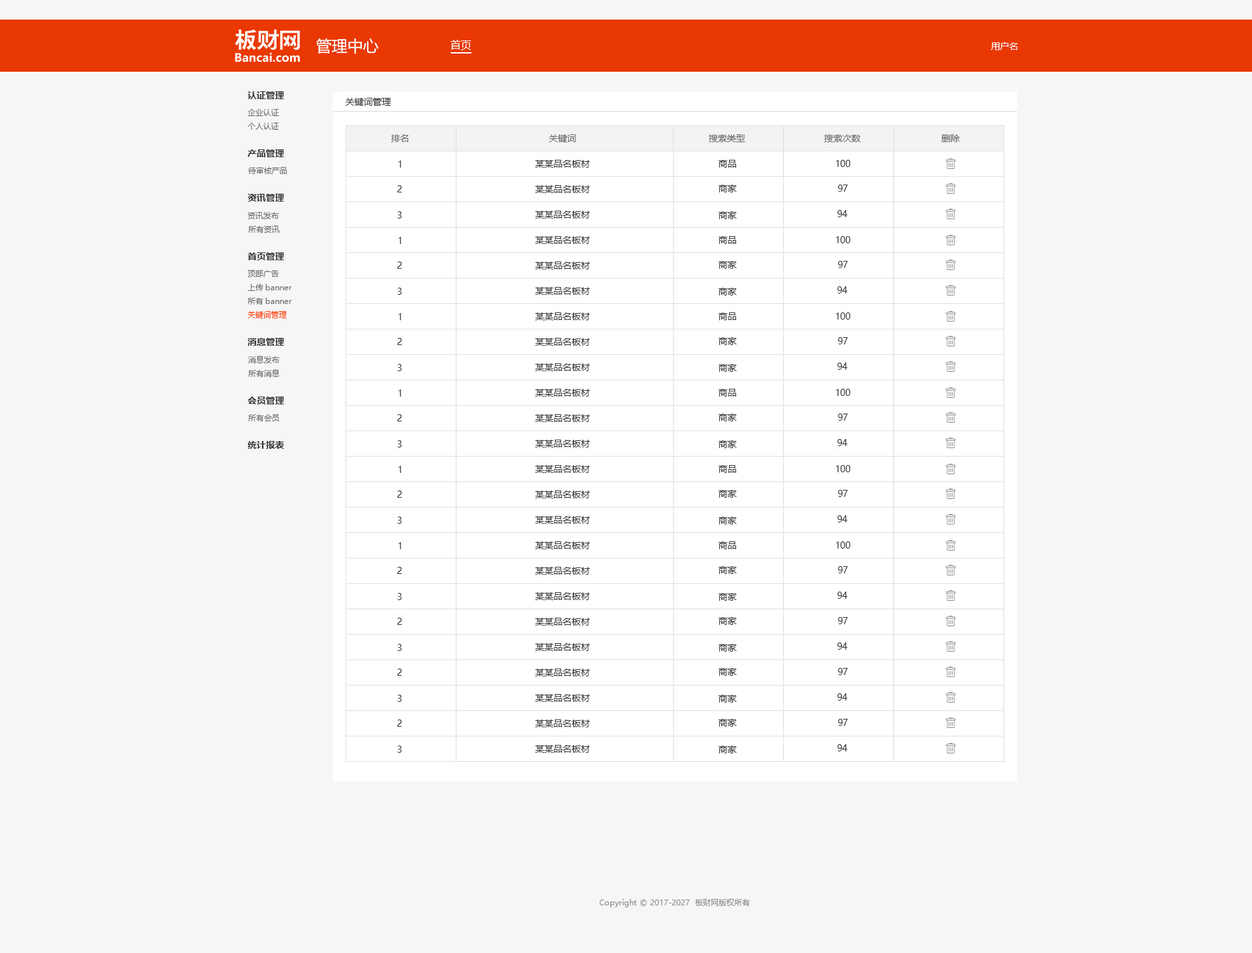
<style>
.page{position:relative;width:1252px;height:953px;background:#f6f6f6}
.page>*{position:absolute;margin:0}
.t1{font:15.6px "MicrosoftYaHei";color:#ffffff}
.t2{font:10.4px "MicrosoftYaHei";color:#ffffff}
.t3{font:9.1px "MicrosoftYaHei";color:#ffffff}
.t4{font:9.1px "MicrosoftYaHei-Bold";color:#333333}
.t5{font:9.1px "MicrosoftYaHei";color:#333333}
.t6{font:7.8px "MicrosoftYaHei";color:#666666}
.t7{font:9.1px "MicrosoftYaHei";color:#666666}
.t8{font:7.8px "MicrosoftYaHei";color:#ff3c00}
.t9{font:7.8px "MicrosoftYaHei";color:#888888}
</style>
<div class="page">
<p class="t1" style="left:316px;top:38px;width:63px;height:16px">管理中心</p>
<p class="t2" style="left:451px;top:40px;width:20px;height:10px">首页</p>
<p class="t3" style="left:991px;top:42px;width:27px;height:8px">用户名</p>
<p class="t4" style="left:248px;top:91px;width:36px;height:8px">认证管理</p>
<p class="t5" style="left:346px;top:98px;width:45px;height:8px">关键词管理</p>
<p class="t6" style="left:248px;top:109px;width:31px;height:7px">企业认证</p>
<p class="t6" style="left:248px;top:123px;width:31px;height:7px">个人认证</p>
<p class="t7" style="left:391px;top:134px;width:18px;height:8px">排名</p>
<p class="t7" style="left:549px;top:134px;width:27px;height:8px">关键词</p>
<p class="t7" style="left:709px;top:134px;width:36px;height:8px">搜索类型</p>
<p class="t7" style="left:824px;top:134px;width:37px;height:8px">搜索次数</p>
<p class="t7" style="left:941px;top:134px;width:19px;height:8px">删除</p>
<p class="t4" style="left:247px;top:149px;width:37px;height:8px">产品管理</p>
<p class="t5" style="left:398px;top:160px;width:3px;height:8px">1</p>
<p class="t5" style="left:535px;top:160px;width:55px;height:8px">某某品名板材</p>
<p class="t5" style="left:718px;top:160px;width:18px;height:8px">商品</p>
<p class="t5" style="left:836px;top:160px;width:14px;height:7px">100</p>
<p class="t6" style="left:248px;top:167px;width:39px;height:7px">待审核产品</p>
<p class="t5" style="left:397px;top:185px;width:5px;height:7px">2</p>
<p class="t5" style="left:535px;top:185px;width:55px;height:8px">某某品名板材</p>
<p class="t5" style="left:718px;top:185px;width:19px;height:7px">商家</p>
<p class="t5" style="left:838px;top:185px;width:10px;height:7px">97</p>
<p class="t4" style="left:248px;top:194px;width:36px;height:7px">资讯管理</p>
<p class="t5" style="left:837px;top:210px;width:11px;height:7px">94</p>
<p class="t6" style="left:248px;top:212px;width:31px;height:7px">资讯发布</p>
<p class="t5" style="left:397px;top:211px;width:5px;height:7px">3</p>
<p class="t5" style="left:535px;top:211px;width:55px;height:7px">某某品名板材</p>
<p class="t5" style="left:718px;top:211px;width:19px;height:8px">商家</p>
<p class="t6" style="left:248px;top:226px;width:32px;height:7px">所有资讯</p>
<p class="t5" style="left:398px;top:237px;width:3px;height:7px">1</p>
<p class="t5" style="left:535px;top:236px;width:55px;height:8px">某某品名板材</p>
<p class="t5" style="left:718px;top:236px;width:18px;height:8px">商品</p>
<p class="t5" style="left:836px;top:236px;width:14px;height:7px">100</p>
<p class="t4" style="left:248px;top:252px;width:36px;height:8px">首页管理</p>
<p class="t6" style="left:247px;top:270px;width:32px;height:7px">顶部广告</p>
<p class="t5" style="left:397px;top:261px;width:5px;height:8px">2</p>
<p class="t5" style="left:535px;top:261px;width:55px;height:8px">某某品名板材</p>
<p class="t5" style="left:718px;top:261px;width:19px;height:8px">商家</p>
<p class="t5" style="left:838px;top:261px;width:10px;height:7px">97</p>
<p class="t6" style="left:248px;top:284px;width:44px;height:7px">上传banner</p>
<p class="t5" style="left:397px;top:288px;width:5px;height:7px">3</p>
<p class="t5" style="left:535px;top:287px;width:55px;height:8px">某某品名板材</p>
<p class="t5" style="left:718px;top:288px;width:19px;height:7px">商家</p>
<p class="t5" style="left:837px;top:286px;width:11px;height:7px">94</p>
<p class="t6" style="left:248px;top:297px;width:44px;height:7px">所有banner</p>
<p class="t8" style="left:248px;top:311px;width:39px;height:7px">关键词管理</p>
<p class="t5" style="left:398px;top:313px;width:3px;height:7px">1</p>
<p class="t5" style="left:535px;top:312px;width:55px;height:8px">某某品名板材</p>
<p class="t5" style="left:718px;top:312px;width:18px;height:8px">商品</p>
<p class="t5" style="left:836px;top:312px;width:14px;height:7px">100</p>
<p class="t4" style="left:248px;top:338px;width:36px;height:8px">消息管理</p>
<p class="t5" style="left:397px;top:338px;width:5px;height:7px">2</p>
<p class="t5" style="left:535px;top:338px;width:55px;height:8px">某某品名板材</p>
<p class="t5" style="left:718px;top:337px;width:19px;height:8px">商家</p>
<p class="t5" style="left:838px;top:337px;width:10px;height:7px">97</p>
<p class="t6" style="left:248px;top:355px;width:32px;height:8px">消息发布</p>
<p class="t5" style="left:397px;top:364px;width:5px;height:7px">3</p>
<p class="t5" style="left:535px;top:363px;width:55px;height:8px">某某品名板材</p>
<p class="t5" style="left:718px;top:364px;width:19px;height:8px">商家</p>
<p class="t5" style="left:837px;top:363px;width:11px;height:7px">94</p>
<p class="t6" style="left:248px;top:369px;width:32px;height:8px">所有消息</p>
<p class="t5" style="left:398px;top:389px;width:3px;height:7px">1</p>
<p class="t5" style="left:535px;top:389px;width:55px;height:7px">某某品名板材</p>
<p class="t5" style="left:718px;top:389px;width:18px;height:7px">商品</p>
<p class="t5" style="left:836px;top:389px;width:14px;height:7px">100</p>
<p class="t4" style="left:248px;top:396px;width:36px;height:8px">会员管理</p>
<p class="t5" style="left:718px;top:413px;width:19px;height:8px">商家</p>
<p class="t5" style="left:838px;top:413px;width:10px;height:8px">97</p>
<p class="t6" style="left:248px;top:414px;width:32px;height:7px">所有会员</p>
<p class="t5" style="left:397px;top:414px;width:5px;height:7px">2</p>
<p class="t5" style="left:535px;top:414px;width:55px;height:8px">某某品名板材</p>
<p class="t4" style="left:248px;top:441px;width:36px;height:8px">统计报表</p>
<p class="t5" style="left:397px;top:440px;width:5px;height:7px">3</p>
<p class="t5" style="left:535px;top:439px;width:55px;height:8px">某某品名板材</p>
<p class="t5" style="left:718px;top:440px;width:19px;height:8px">商家</p>
<p class="t5" style="left:837px;top:439px;width:11px;height:7px">94</p>
<p class="t5" style="left:398px;top:466px;width:3px;height:7px">1</p>
<p class="t5" style="left:535px;top:465px;width:55px;height:8px">某某品名板材</p>
<p class="t5" style="left:718px;top:465px;width:18px;height:8px">商品</p>
<p class="t5" style="left:836px;top:465px;width:14px;height:7px">100</p>
<p class="t5" style="left:397px;top:490px;width:5px;height:7px">2</p>
<p class="t5" style="left:535px;top:490px;width:55px;height:8px">某某品名板材</p>
<p class="t5" style="left:718px;top:490px;width:19px;height:7px">商家</p>
<p class="t5" style="left:838px;top:490px;width:10px;height:7px">97</p>
<p class="t5" style="left:397px;top:516px;width:5px;height:8px">3</p>
<p class="t5" style="left:535px;top:516px;width:55px;height:8px">某某品名板材</p>
<p class="t5" style="left:718px;top:516px;width:19px;height:8px">商家</p>
<p class="t5" style="left:837px;top:515px;width:11px;height:7px">94</p>
<p class="t5" style="left:398px;top:542px;width:3px;height:7px">1</p>
<p class="t5" style="left:535px;top:541px;width:55px;height:8px">某某品名板材</p>
<p class="t5" style="left:718px;top:541px;width:18px;height:8px">商品</p>
<p class="t5" style="left:836px;top:541px;width:14px;height:7px">100</p>
<p class="t5" style="left:397px;top:567px;width:5px;height:7px">2</p>
<p class="t5" style="left:535px;top:567px;width:55px;height:7px">某某品名板材</p>
<p class="t5" style="left:718px;top:566px;width:19px;height:8px">商家</p>
<p class="t5" style="left:838px;top:566px;width:10px;height:7px">97</p>
<p class="t5" style="left:397px;top:593px;width:5px;height:7px">3</p>
<p class="t5" style="left:535px;top:592px;width:55px;height:8px">某某品名板材</p>
<p class="t5" style="left:718px;top:593px;width:19px;height:7px">商家</p>
<p class="t5" style="left:837px;top:591px;width:11px;height:8px">94</p>
<p class="t5" style="left:397px;top:617px;width:5px;height:8px">2</p>
<p class="t5" style="left:535px;top:617px;width:55px;height:8px">某某品名板材</p>
<p class="t5" style="left:718px;top:617px;width:19px;height:8px">商家</p>
<p class="t5" style="left:838px;top:617px;width:10px;height:7px">97</p>
<p class="t5" style="left:397px;top:644px;width:5px;height:7px">3</p>
<p class="t5" style="left:535px;top:643px;width:55px;height:8px">某某品名板材</p>
<p class="t5" style="left:718px;top:644px;width:19px;height:7px">商家</p>
<p class="t5" style="left:837px;top:642px;width:11px;height:7px">94</p>
<p class="t5" style="left:397px;top:668px;width:5px;height:7px">2</p>
<p class="t5" style="left:535px;top:668px;width:55px;height:8px">某某品名板材</p>
<p class="t5" style="left:718px;top:668px;width:19px;height:7px">商家</p>
<p class="t5" style="left:838px;top:668px;width:10px;height:7px">97</p>
<p class="t5" style="left:397px;top:694px;width:5px;height:8px">3</p>
<p class="t5" style="left:535px;top:694px;width:55px;height:8px">某某品名板材</p>
<p class="t5" style="left:718px;top:694px;width:19px;height:8px">商家</p>
<p class="t5" style="left:837px;top:693px;width:11px;height:7px">94</p>
<p class="t5" style="left:397px;top:719px;width:5px;height:7px">2</p>
<p class="t5" style="left:535px;top:719px;width:55px;height:8px">某某品名板材</p>
<p class="t5" style="left:718px;top:718px;width:19px;height:8px">商家</p>
<p class="t5" style="left:838px;top:718px;width:10px;height:8px">97</p>
<p class="t5" style="left:397px;top:745px;width:5px;height:7px">3</p>
<p class="t5" style="left:535px;top:745px;width:55px;height:7px">某某品名板材</p>
<p class="t5" style="left:718px;top:745px;width:19px;height:8px">商家</p>
<p class="t5" style="left:837px;top:744px;width:11px;height:7px">94</p>
<p class="t9" style="left:599px;top:898px;width:151px;height:9px">Copyright © 2017-2027  板财网版权所有</p>
</div>
